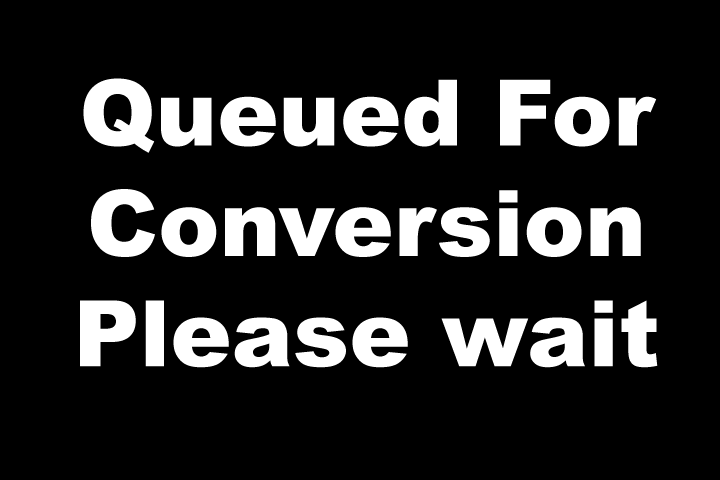
<style>
.page{position:relative;width:720px;height:480px;background:#000000}
.page>*{position:absolute;margin:0}
.t1{font:92px "Arial-Black";color:#ffffff}
</style>
<div class="page">
<p class="t1" style="left:80px;top:78px;width:578px;height:290px;text-align:center">Queued For<br>Conversion<br>Please wait</p>
</div>
